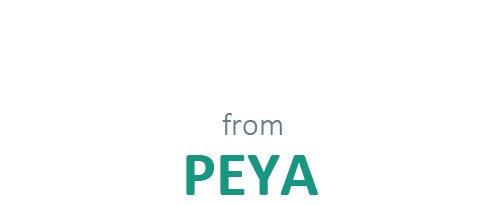
<style>
.page{position:relative;width:503px;height:205px;background:#ffffff}
.page>*{position:absolute;margin:0}
.t1{font:32px "Calibri-Light";color:#657b90}
.t2{font:64px "Calibri-Bold";color:#179681}
</style>
<div class="page">
<p class="t1" style="left:222px;top:113px;width:60px;height:22px">from</p>
<p class="t2" style="left:186px;top:155px;width:132px;height:40px">PEYA</p>
</div>
